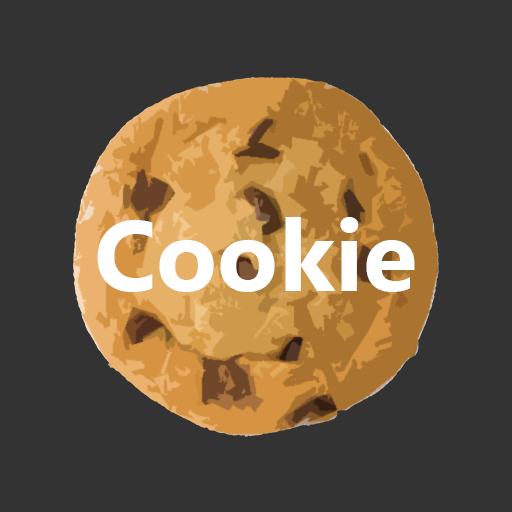
<style>
.page{position:relative;width:512px;height:512px;background:#333333}
.page>*{position:absolute;margin:0}
.t1{font:100px "MicrosoftTaiLe-Bold";color:#ffffff}
</style>
<div class="page">
<p class="t1" style="left:97px;top:217px;width:318px;height:75px">Cookie</p>
</div>
